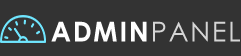
<style>
.page{position:relative;width:241px;height:56px;background:#333333}
.page>*{position:absolute;margin:0}
.t1{font:27.5px "CenturyGothic-Bold";letter-spacing:0.05em;color:#ffffff}
.t2{font:27.5px "CenturyGothic";letter-spacing:0.05em;color:#d5d5d5}
</style>
<div class="page">
<p class="t1" style="left:51px;top:21px;width:189px;height:21px">ADMIN<span class="t2">PANEL</span></p>
</div>
